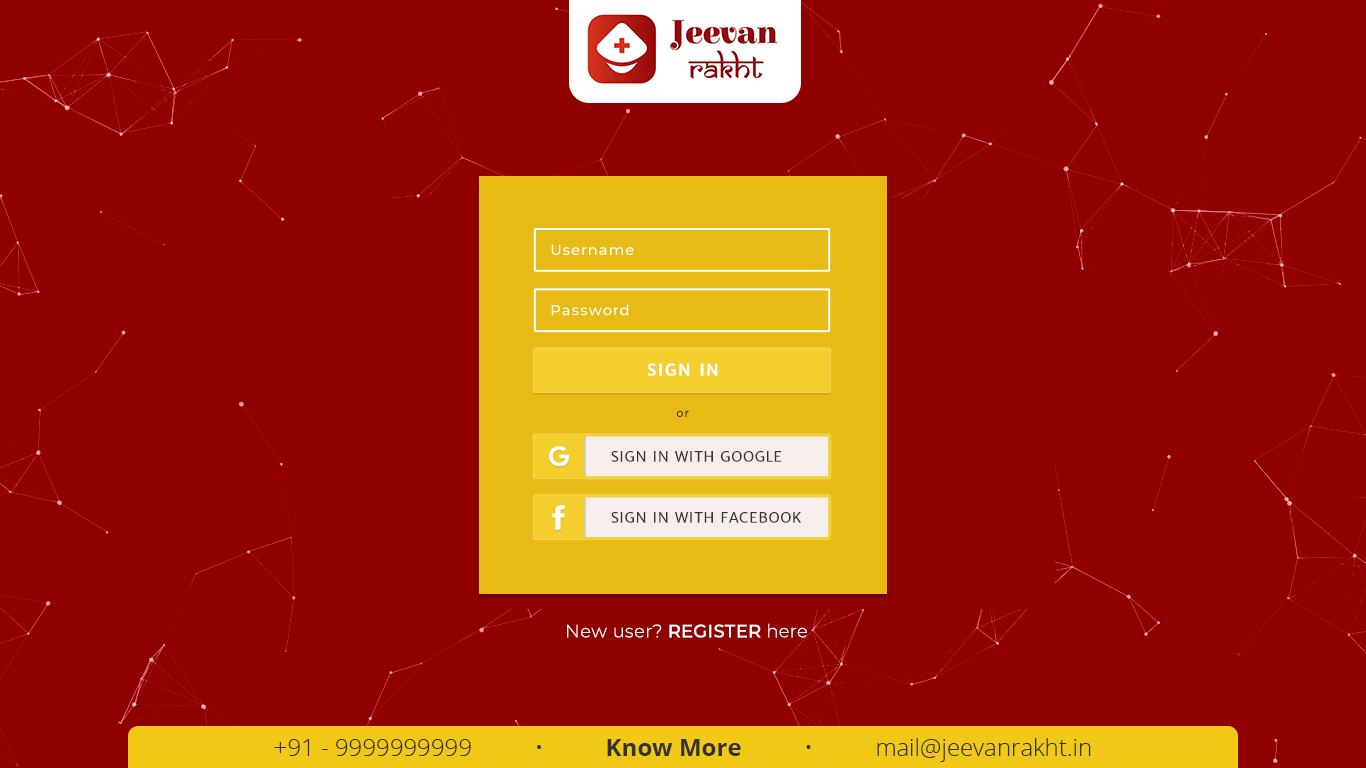
<style>
.page{position:relative;width:1366px;height:768px;background:#900000}
.page>*{position:absolute;margin:0}
.t1{font:14.6px "Montserrat-Medium";letter-spacing:0.075em;color:#ffffff}
.t2{font:16.2px "MerriweatherSans-Bold";letter-spacing:0.075em;color:#ffffff;text-transform:uppercase}
.t3{font:11.4px "Montserrat-Regular";letter-spacing:0.075em;color:#363636}
.t4{font:14.6px "MerriweatherSans-Regular";letter-spacing:0.025em;color:#363636;text-transform:uppercase}
.t5{font:18px "Montserrat-Light";letter-spacing:0.01em;color:#ffffff}
.t6{font:18px "Montserrat-Medium";letter-spacing:0.01em;color:#ffffff}
.t7{font:18px "Montserrat-Medium";letter-spacing:0.01em;color:#ffffff;text-transform:uppercase}
</style>
<div class="page">
<p class="t1" style="left:551px;top:244px;width:83px;height:11px">Username</p>
<p class="t1" style="left:551px;top:304px;width:78px;height:12px">Password</p>
<p class="t2" style="left:647px;top:363px;width:71px;height:13px">Sign in</p>
<p class="t3" style="left:676px;top:410px;width:13px;height:7px">or</p>
<p class="t4" style="left:611px;top:451px;width:171px;height:11px">sign in with google</p>
<p class="t4" style="left:611px;top:512px;width:190px;height:11px">sign in with facebook</p>
<p class="t5" style="left:567px;top:623px;width:240px;height:15px">New user? <span class="t6">R</span><span class="t7">egister</span> here</p>
</div>
